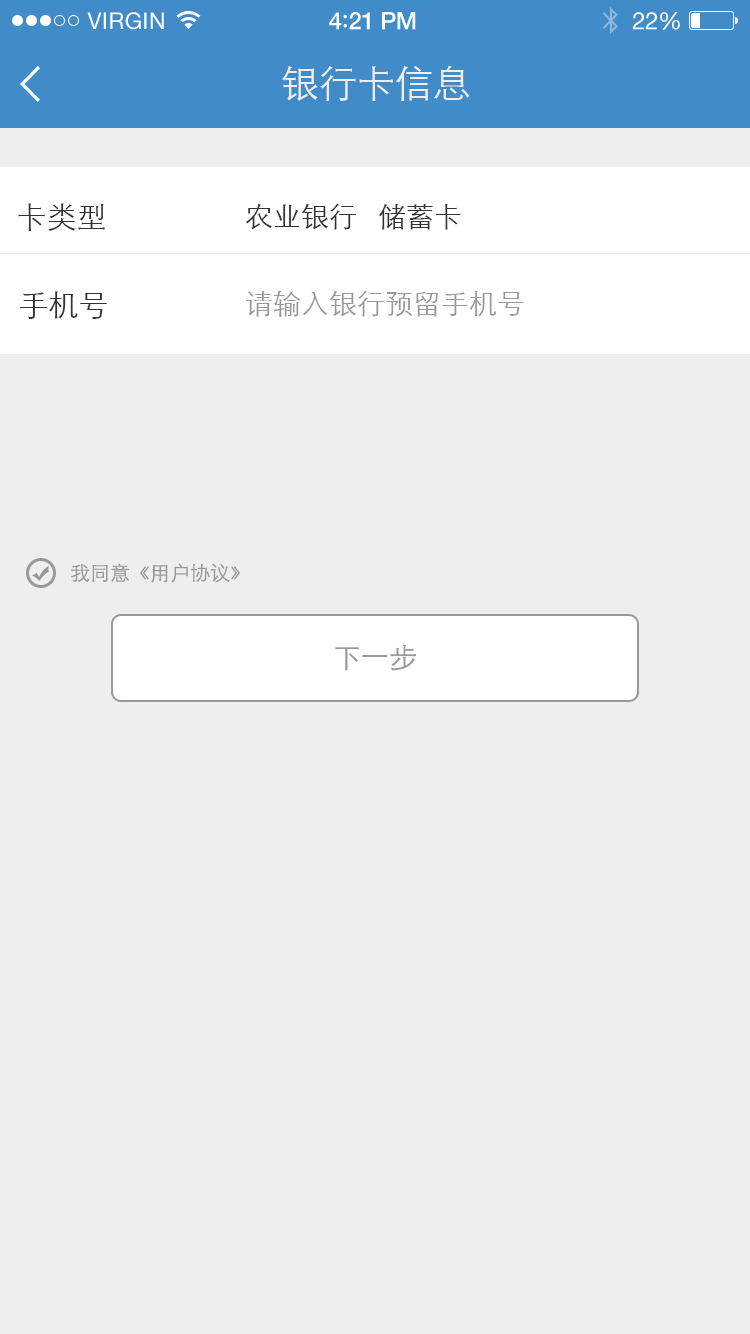
<style>
.page{position:relative;width:750px;height:1334px;background:#eeeeee}
.page>*{position:absolute;margin:0}
.t1{font:23px "HelveticaNeue";letter-spacing:0.02em;color:#ffffff}
.t2{font:24px "HelveticaNeue-Medium";letter-spacing:-0.02em;color:#ffffff}
.t3{font:26px "Avenir-Medium";letter-spacing:-0.02em;color:#ffffff}
.t4{font:24px "HelveticaNeue";letter-spacing:-0.02em;color:#ffffff}
.t5{font:38px "STXihei";color:#eeeeee}
.t6{font:30px "STXihei";color:#333333}
.t7{font:28px "STXihei";color:#333333}
.t8{font:28px "STXihei";color:#999999}
.t9{font:20px "STXihei";color:#999999}
</style>
<div class="page">
<p class="t1" style="left:87px;top:12px;width:77px;height:18px">VIRGIN</p>
<p class="t2" style="left:329px;top:12px;width:87px;height:18px">4<span class="t3">:</span>21 PM</p>
<p class="t4" style="left:632px;top:12px;width:48px;height:18px">22%</p>
<p class="t5" style="left:282px;top:65px;width:188px;height:36px">银行卡信息</p>
<p class="t6" style="left:18px;top:203px;width:87px;height:28px">卡类型</p>
<p class="t7" style="left:245px;top:203px;width:216px;height:27px">农业银行   储蓄卡</p>
<p class="t6" style="left:20px;top:291px;width:87px;height:28px">手机号</p>
<p class="t8" style="left:246px;top:290px;width:278px;height:27px">请输入银行预留手机号</p>
<p class="t9" style="left:71px;top:563px;width:169px;height:20px">我同意《用户协议》</p>
<p class="t8" style="left:335px;top:645px;width:81px;height:26px">下一步</p>
</div>
